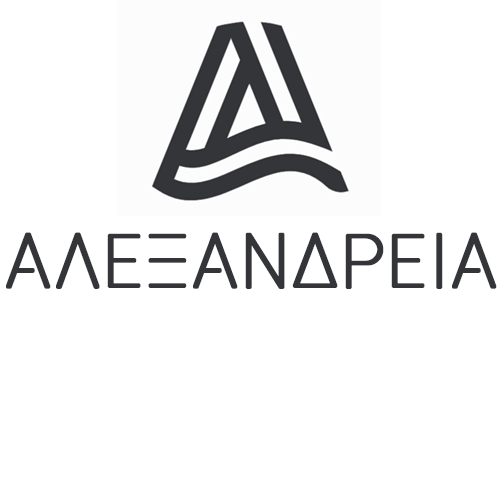
<style>
.page{position:relative;width:500px;height:500px;background:#ffffff}
.page>*{position:absolute;margin:0}
.t1{font:76px "ZenKurenaido-Regular";color:#343539;text-transform:uppercase;font-weight:bold}
</style>
<div class="page">
<p class="t1" style="left:6px;top:232px;width:491px;height:57px">ΑΛΕΞΑΝΔΡΕΙΑ</p>
</div>
